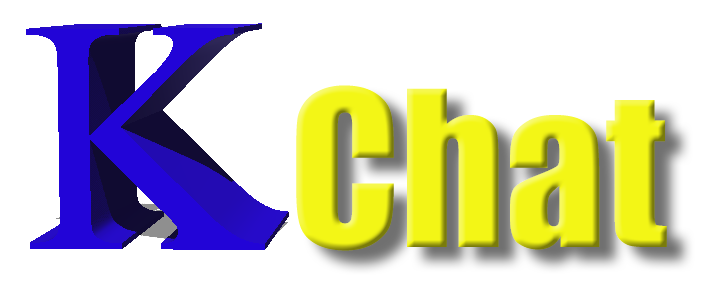
<style>
.page{position:relative;width:706px;height:294px;background:#ffffff}
.page>*{position:absolute;margin:0}
.t1{font:200px "Impact";color:#f3f616}
</style>
<div class="page">
<p class="t1" style="left:296px;top:85px;width:371px;height:166px">Chat</p>
</div>
